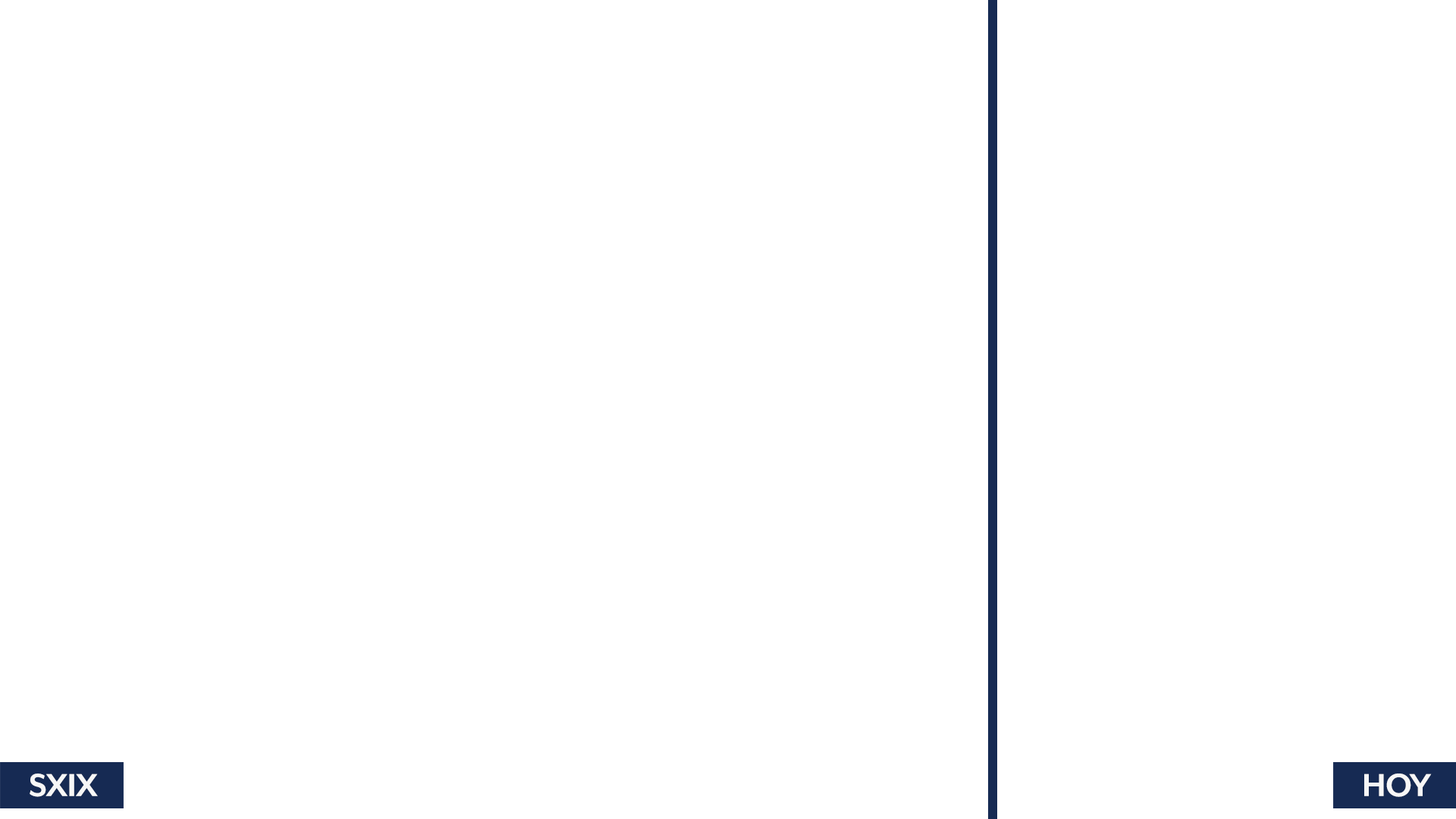
<style>
.page{position:relative;width:1456px;height:819px;background:#ffffff}
.page>*{position:absolute;margin:0}
.t1{font:36.4px "MrEavesModOT-Bold";letter-spacing:-0.01em;color:#f7f7f7}
</style>
<div class="page">
<p class="t1" style="left:30px;top:773px;width:68px;height:24px">SXIX</p>
<p class="t1" style="left:1364px;top:773px;width:68px;height:24px">HOY</p>
</div>
